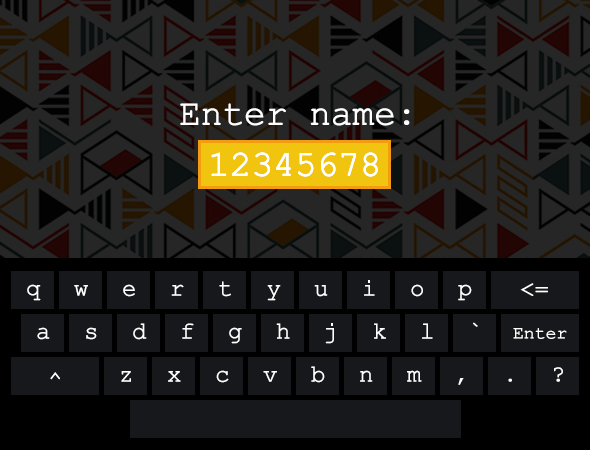
<style>
.page{position:relative;width:590px;height:450px;background:#17181c}
.page>*{position:absolute;margin:0}
.t1{font:36px "ERKurierKOI8Normal";color:#ffffff}
.t2{font:24px "ERKurierKOI8Normal";color:#ffffff}
.t3{font:18px "ERKurierKOI8Normal";color:#ffffff}
</style>
<div class="page">
<p class="t1" style="left:180px;top:103px;width:230px;height:23px">Enter name:</p>
<p class="t1" style="left:211px;top:152px;width:167px;height:25px">12345678</p>
<p class="t1" style="left:211px;top:152px;width:167px;height:25px">12345678</p>
<p class="t2" style="left:219px;top:281px;width:12px;height:16px">t</p>
<p class="t2" style="left:364px;top:280px;width:11px;height:16px">i</p>
<p class="t2" style="left:27px;top:284px;width:14px;height:17px">q</p>
<p class="t2" style="left:74px;top:285px;width:14px;height:11px">w</p>
<p class="t2" style="left:123px;top:284px;width:12px;height:13px">e</p>
<p class="t2" style="left:171px;top:284px;width:13px;height:12px">r</p>
<p class="t2" style="left:267px;top:285px;width:14px;height:16px">y</p>
<p class="t2" style="left:314px;top:285px;width:14px;height:12px">u</p>
<p class="t2" style="left:411px;top:284px;width:12px;height:13px">o</p>
<p class="t2" style="left:458px;top:284px;width:14px;height:17px">p</p>
<p class="t2" style="left:520px;top:283px;width:28px;height:13px">&lt;=</p>
<p class="t2" style="left:37px;top:327px;width:13px;height:13px">a</p>
<p class="t2" style="left:86px;top:327px;width:11px;height:13px">s</p>
<p class="t2" style="left:133px;top:323px;width:14px;height:17px">d</p>
<p class="t2" style="left:182px;top:323px;width:12px;height:16px">f</p>
<p class="t2" style="left:229px;top:327px;width:13px;height:17px">g</p>
<p class="t2" style="left:276px;top:323px;width:14px;height:16px">h</p>
<p class="t2" style="left:325px;top:323px;width:9px;height:21px">j</p>
<p class="t2" style="left:374px;top:323px;width:12px;height:16px">k</p>
<p class="t2" style="left:422px;top:323px;width:11px;height:16px">l</p>
<p class="t2" style="left:473px;top:322px;width:5px;height:5px">`</p>
<p class="t3" style="left:513px;top:328px;width:54px;height:11px">Enter</p>
<p class="t2" style="left:311px;top:366px;width:14px;height:17px">b</p>
<p class="t2" style="left:50px;top:372px;width:10px;height:8px">^</p>
<p class="t2" style="left:121px;top:371px;width:10px;height:11px">z</p>
<p class="t2" style="left:168px;top:371px;width:13px;height:11px">x</p>
<p class="t2" style="left:216px;top:370px;width:13px;height:13px">c</p>
<p class="t2" style="left:263px;top:371px;width:14px;height:11px">v</p>
<p class="t2" style="left:360px;top:370px;width:13px;height:12px">n</p>
<p class="t2" style="left:407px;top:370px;width:15px;height:12px">m</p>
<p class="t2" style="left:554px;top:367px;width:9px;height:15px">?</p>
<p class="t2" style="left:458px;top:378px;width:6px;height:7px">,</p>
<p class="t2" style="left:508px;top:378px;width:4px;height:4px">.</p>
</div>
